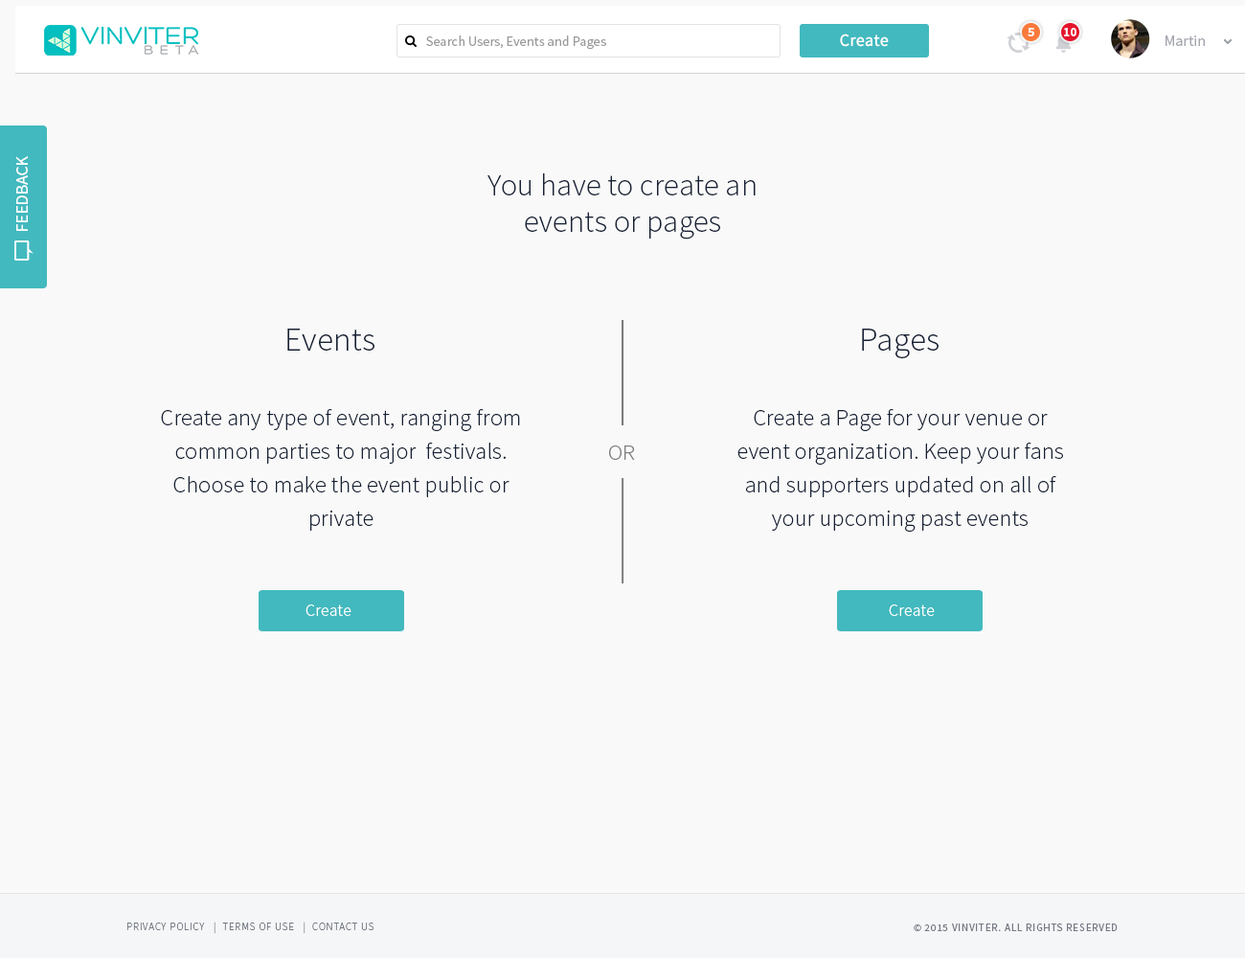
<style>
.page{position:relative;width:1245px;height:958px;background:#f9f9f9}
.page>*{position:absolute;margin:0}
.t1{font:12.5px "SourceSansPro-Bold";color:#ffffff}
.t2{font:13.7px "SourceSansPro-Regular";color:#999999}
.t3{font:17.2px "SourceSansPro-Regular";letter-spacing:0.02em;color:#ffffff}
.t4{font:15.3px "SourceSansPro-Regular";color:#a3a6ae}
.t5{font:17.2px "SourceSansPro-Regular";color:#ffffff}
.t6{font:30.6px/17.2px "SourceSansPro-Light";letter-spacing:0.01em;color:#162135}
.t7{font:33.5px "SourceSansPro-Light";letter-spacing:0.01em;color:#162135}
.t8{font:23px/33.5px "SourceSansPro-Light";letter-spacing:0.01em;color:#162135}
.t9{font:22px "SourceSansPro-Light";letter-spacing:0.01em;color:#7d7d7d}
.t10{font:17.2px "SourceSansPro-Light";letter-spacing:0.01em;color:#ffffff}
.t11{font:10.5px "SourceSansPro-Light";letter-spacing:0.075em;color:#747a85;text-transform:uppercase}
.t12{font:10.5px "SourceSansPro-Regular";letter-spacing:0.075em;color:#747a85;text-transform:uppercase}
</style>
<div class="page">
<p class="t1" style="left:1028px;top:28px;width:6px;height:8px">5</p>
<p class="t1" style="left:1064px;top:28px;width:12px;height:8px">10</p>
<p class="t2" style="left:426px;top:35px;width:180px;height:15px">Search Users, Events and Pages</p>
<p class="t3" style="left:840px;top:34px;width:49px;height:13px">Create</p>
<p class="t4" style="left:1166px;top:35px;width:39px;height:11px">Martin</p>
<p class="t5" style="left:16px;top:156px;width:12px;height:75px;rotate:-90deg">FEEDBACK</p>
<p class="t6" style="left:487px;top:173px;width:269px;height:66px;text-align:center">You have to create an<br>events or pages</p>
<p class="t7" style="left:287px;top:329px;width:87px;height:22px">Events</p>
<p class="t7" style="left:862px;top:329px;width:77px;height:29px">Pages</p>
<p class="t8" style="left:161px;top:409px;width:359px;height:122px;text-align:center">Create any type of event, ranging from common parties to major  festivals. Choose to make the event public or private</p>
<p class="t8" style="left:737px;top:409px;width:326px;height:123px;text-align:center">Create a Page for your venue or event organization. Keep your fans and supporters updated on all of your upcoming past events</p>
<p class="t9" style="left:609px;top:445px;width:26px;height:15px">OR</p>
<p class="t10" style="left:306px;top:604px;width:45px;height:12px">Create</p>
<p class="t10" style="left:889px;top:604px;width:46px;height:12px">Create</p>
<p class="t11" style="left:126px;top:921px;width:248px;height:12px">Privacy Policy   |  Terms of Use   |  Contact us</p>
<p class="t12" style="left:914px;top:923px;width:204px;height:8px">© 2015 VINVITER. All rights reserved</p>
</div>
